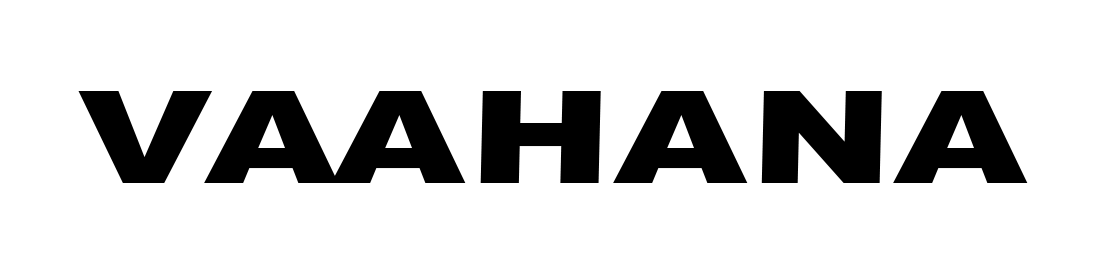
<style>
.page{position:relative;width:1108px;height:272px;background:#ffffff}
.page>*{position:absolute;margin:0}
.t1{font:128.6px "Arial-Black";letter-spacing:0.015em;color:#000000;scale:1.33 1}
</style>
<div class="page">
<p class="t1" style="left:78px;top:91px;width:950px;height:92px">V  AHANA</p>
<p class="t1" style="left:204px;top:91px;width:135px;height:92px">A</p>
</div>
